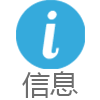
<style>
.page{position:relative;width:100px;height:100px;background:#ffffff}
.page>*{position:absolute;margin:0}
.t1{font:27.8px "MicrosoftYaHei";color:#6d6d6d}
</style>
<div class="page">
<p class="t1" style="left:22px;top:71px;width:56px;height:27px">信息</p>
</div>
